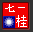
<style>
.page{position:relative;width:33px;height:32px;background:#f20000}
.page>*{position:absolute;margin:0}
.t1{font:10.4px "SimSun";color:#ffffff}
.t2{font:11.7px "SimSun";color:#ffffff}
</style>
<div class="page">
<p class="t1" style="left:5px;top:4px;width:20px;height:8px">七一</p>
<p class="t2" style="left:16px;top:15px;width:11px;height:12px">桂</p>
</div>
